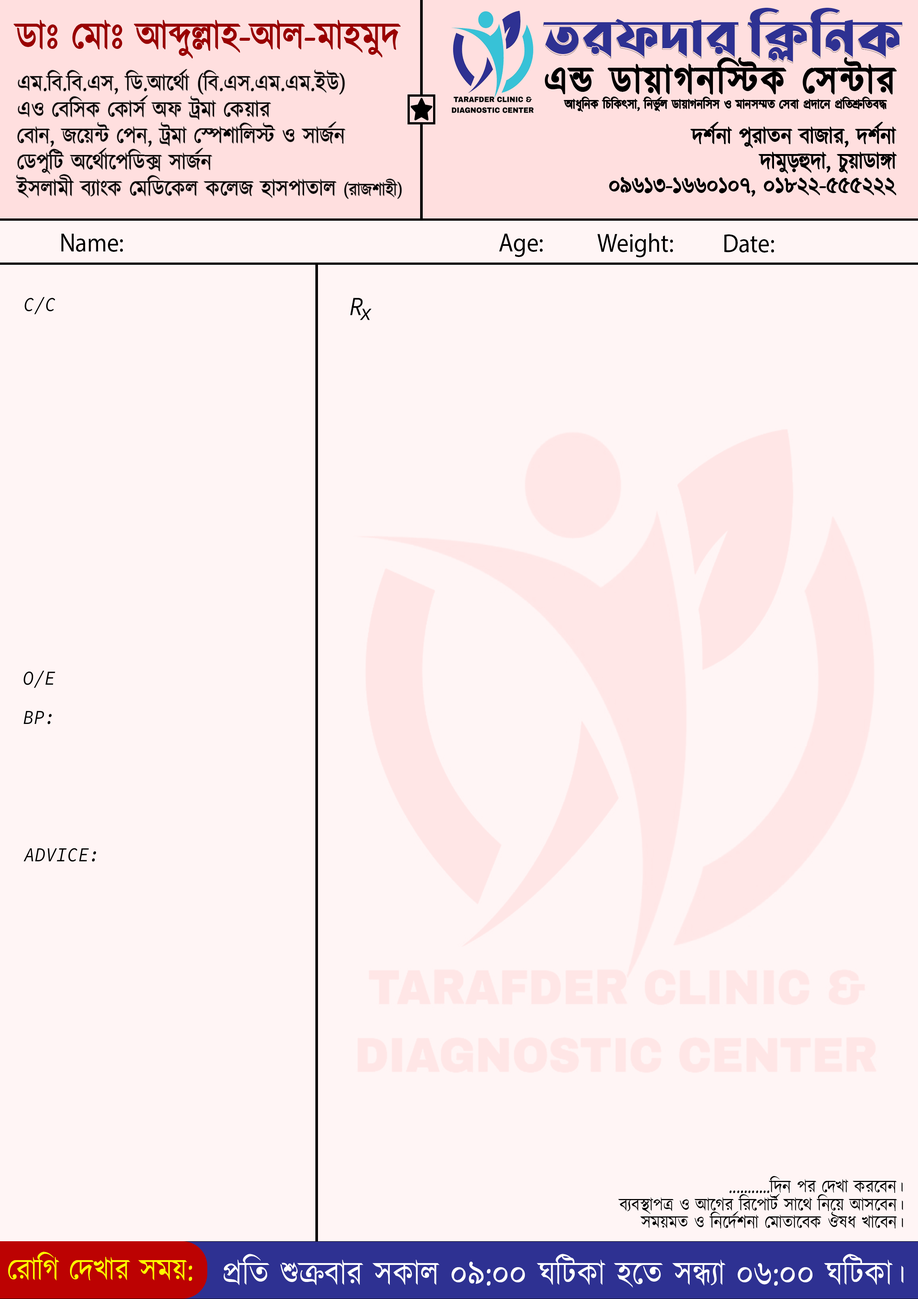
<style>
.page{position:relative;width:918px;height:1299px;background:#fff5f5}
.page>*{position:absolute;margin:0}
.t1{font:53.4px "LiSirajeeSheikhPlainUnicode";color:#2e3192;scale:0.91 1}
.t2{font:39.4px "Kalpurush";color:#9a0000;scale:0.91 1}
.t3{font:39.4px "Kalpurush";letter-spacing:0.06em;color:#000000;scale:0.91 1}
.t4{font:23px/26.3px "Kalpurush";color:#000000;scale:0.91 1}
.t5{font:18.1px/26.3px "Kalpurush";color:#000000;scale:0.91 1}
.t6{font:13.1px "Kalpurush";color:#000000;scale:0.91 1}
.t7{font:23px "Kalpurush";color:#000000;scale:0.91 1}
.t8{font:26.3px "MyriadPro-Regular";color:#000000;scale:0.91 1}
.t9{font:19.7px "SourceCodePro-Regular";color:#000000;scale:0.91 1}
.t10{font:26.3px "SourceCodePro-Regular";color:#000000;scale:0.91 1}
.t11{font:23px "SourceCodePro-Regular";color:#000000;scale:0.91 1}
.t12{font:18.1px "Kalpurush";color:#000000;scale:0.91 1}
.t13{font:31.2px "Kalpurush";color:#fcff00;scale:0.91 1}
.t14{font:34.2px "Kalpurush";color:#ffffff;scale:0.91 1}
</style>
<div class="page">
<p class="t1" style="left:543px;top:8px;width:360px;height:54px">তরফদার ক্লিনিক</p>
<p class="t2" style="left:14px;top:20px;width:387px;height:38px">ডাঃ মোঃ আব্দুল্লাহ-আল-মাহমুদ</p>
<p class="t3" style="left:545px;top:58px;width:351px;height:36px">এন্ড ডায়াগনস্টিক সেন্টার</p>
<p class="t4" style="left:16px;top:69px;width:386px;height:130px">এম.বি.বি.এস, ডি.আর্থো (বি.এস.এম.এম.ইউ)<br>এও বেসিক কোর্স অফ ট্রমা কেয়ার<br>বোন, জয়েন্ট পেন, ট্রমা স্পেশালিস্ট ও সার্জন<br>ডেপুটি অর্থোপেডিক্স সার্জন<br>ইসলামী ব্যাংক মেডিকেল কলেজ হাসপাতাল <span class="t5">(রাজশাহী)</span></p>
<p class="t6" style="left:564px;top:97px;width:323px;height:15px">আধুনিক চিকিৎসা, নির্ভুল ডায়াগনসিস ও মানসম্মত সেবা প্রদানে প্রতিশ্রুতিবদ্ধ</p>
<p class="t7" style="left:690px;top:122px;width:206px;height:26px">দর্শনা পুরাতন বাজার, দর্শনা</p>
<p class="t7" style="left:759px;top:152px;width:138px;height:22px">দামুড়হুদা, চুয়াডাঙ্গা</p>
<p class="t7" style="left:609px;top:177px;width:287px;height:20px">০৯৬১৩-১৬৬০১০৭, ০১৮২২-৫৫৫২২২</p>
<p class="t8" style="left:61px;top:234px;width:62px;height:18px">Name:</p>
<p class="t8" style="left:499px;top:234px;width:44px;height:23px">Age:</p>
<p class="t8" style="left:598px;top:233px;width:75px;height:24px">Weight:</p>
<p class="t8" style="left:725px;top:234px;width:49px;height:18px">Date:</p>
<p class="t9" style="left:24px;top:297px;width:31px;height:17px">C/C</p>
<p class="t10" style="left:350px;top:298px;width:13px;height:17px">R</p>
<p class="t11" style="left:360px;top:308px;width:12px;height:12px">x</p>
<p class="t9" style="left:24px;top:670px;width:31px;height:18px">O/E</p>
<p class="t9" style="left:24px;top:711px;width:28px;height:13px">BP:</p>
<p class="t9" style="left:23px;top:848px;width:73px;height:14px">ADVICE:</p>
<p class="t12" style="left:729px;top:1176px;width:174px;height:17px">...........দিন পর দেখা করবেন।</p>
<p class="t12" style="left:618px;top:1194px;width:285px;height:20px">ব্যবস্থাপত্র ও আগের রিপোর্ট সাথে নিয়ে আসবেন।</p>
<p class="t12" style="left:640px;top:1211px;width:263px;height:17px">সময়মত ও নির্দেশনা মোতাবেক ঔষধ খাবেন।</p>
<p class="t13" style="left:8px;top:1251px;width:184px;height:30px">রোগি দেখার সময়:</p>
<p class="t14" style="left:224px;top:1254px;width:680px;height:34px">প্রতি শুক্রবার সকাল ০৯:০০ ঘটিকা হতে সন্ধ্যা ০৬:০০ ঘটিকা।</p>
</div>
